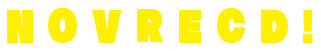
<style>
.page{position:relative;width:321px;height:51px;background:#ffffff}
.page>*{position:absolute;margin:0}
.t1{font:42.7px "RaglanStd-UB";letter-spacing:0.005em;color:#fef000;scale:0.85 1}
</style>
<div class="page">
<p class="t1" style="left:7px;top:9px;width:26px;height:34px">N</p>
<p class="t1" style="left:48px;top:7px;width:29px;height:36px">O</p>
<p class="t1" style="left:92px;top:9px;width:30px;height:34px">V</p>
<p class="t1" style="left:137px;top:9px;width:27px;height:34px">R</p>
<p class="t1" style="left:179px;top:10px;width:23px;height:33px">E</p>
<p class="t1" style="left:217px;top:7px;width:29px;height:36px">C</p>
<p class="t1" style="left:261px;top:9px;width:27px;height:34px">D</p>
<p class="t1" style="left:303px;top:9px;width:10px;height:34px">!</p>
</div>
